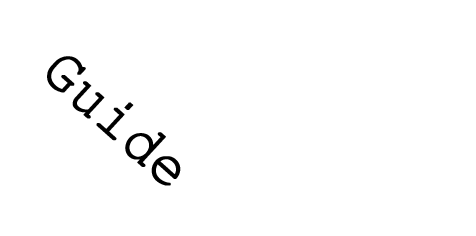
<style>
.page{position:relative;width:476px;height:236px;background:#ffffff}
.page>*{position:absolute;margin:0}
.t1{font:60.7px "CourierNewPSMT";color:#000000;font-weight:bold;scale:0.93 1}
</style>
<div class="page">
<p class="t1" style="left:47px;top:56px;width:134px;height:130px;rotate:42deg">Guide</p>
</div>
